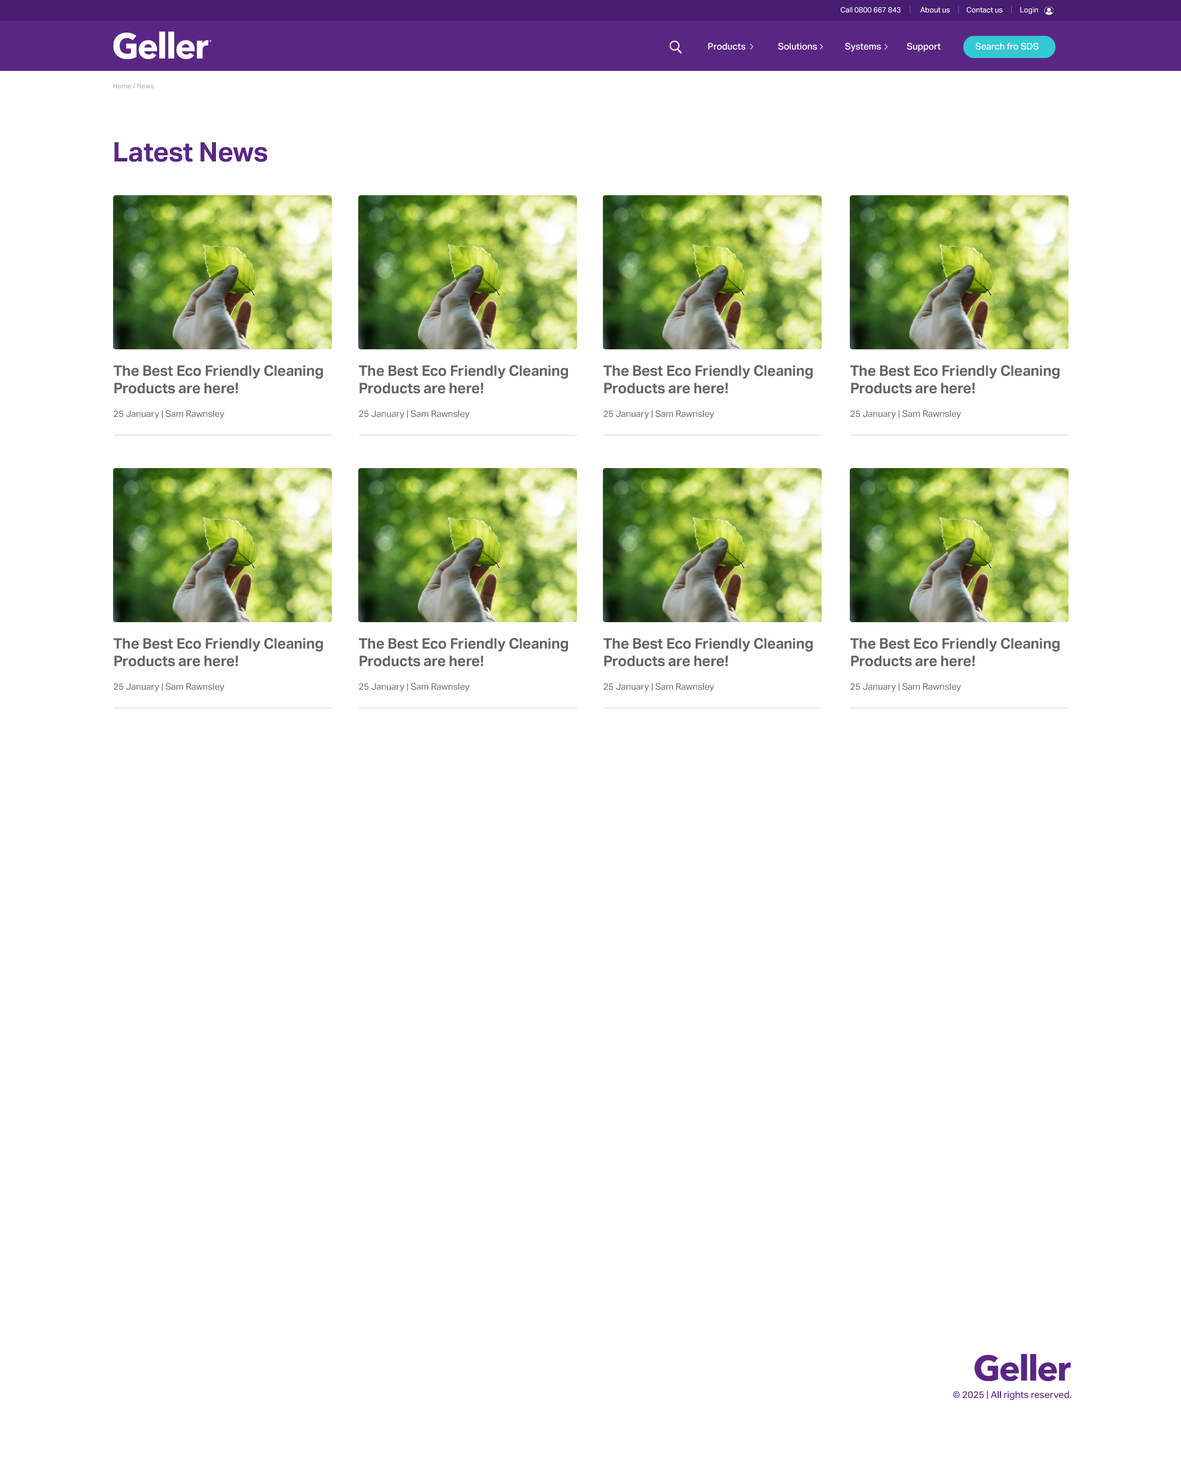
<style>
.page{position:relative;width:1181px;height:1484px;background:#ffffff}
.page>*{position:absolute;margin:0}
.t1{font:7.3px "AktivGrotesk-Regular";color:#fefefe}
.t2{font:9px "AktivGrotesk-Medium";color:#fefefe}
.t3{font:6.8px "AktivGrotesk-Medium";color:#b4b4b4}
.t4{font:27px "AktivGrotesk-Bold";letter-spacing:-0.01em;color:#5a2684}
.t5{font:14.6px "AktivGrotesk-Bold";letter-spacing:-0.01em;color:#646464}
.t6{font:9px "AktivGrotesk-Regular";color:#646464}
.t7{font:9.4px "AktivGrotesk-Medium";color:#5a2684}
</style>
<div class="page">
<p class="t1" style="left:841px;top:7px;width:60px;height:6px">Call 0800 667 843</p>
<p class="t1" style="left:920px;top:7px;width:30px;height:6px">About us</p>
<p class="t1" style="left:967px;top:7px;width:36px;height:6px">Contact us</p>
<p class="t1" style="left:1020px;top:7px;width:18px;height:7px">Login</p>
<p class="t2" style="left:708px;top:43px;width:38px;height:7px">Products</p>
<p class="t2" style="left:778px;top:43px;width:39px;height:7px">Solutions</p>
<p class="t2" style="left:845px;top:43px;width:36px;height:9px">Systems</p>
<p class="t2" style="left:907px;top:43px;width:34px;height:9px">Support</p>
<p class="t2" style="left:975px;top:43px;width:64px;height:7px">Search fro SDS</p>
<p class="t3" style="left:113px;top:83px;width:41px;height:6px">Home / News</p>
<p class="t4" style="left:114px;top:142px;width:154px;height:20px">Latest News</p>
<p class="t5" style="left:114px;top:365px;width:209px;height:29px">The Best Eco Friendly Cleaning Products are here!</p>
<p class="t5" style="left:359px;top:365px;width:209px;height:29px">The Best Eco Friendly Cleaning Products are here!</p>
<p class="t5" style="left:604px;top:365px;width:209px;height:29px">The Best Eco Friendly Cleaning Products are here!</p>
<p class="t5" style="left:850px;top:365px;width:210px;height:29px">The Best Eco Friendly Cleaning Products are here!</p>
<p class="t6" style="left:114px;top:410px;width:110px;height:8px">25 January | Sam Rawnsley</p>
<p class="t6" style="left:359px;top:410px;width:111px;height:8px">25 January | Sam Rawnsley</p>
<p class="t6" style="left:604px;top:410px;width:110px;height:8px">25 January | Sam Rawnsley</p>
<p class="t6" style="left:850px;top:410px;width:111px;height:8px">25 January | Sam Rawnsley</p>
<p class="t5" style="left:114px;top:638px;width:209px;height:29px">The Best Eco Friendly Cleaning Products are here!</p>
<p class="t5" style="left:359px;top:638px;width:209px;height:29px">The Best Eco Friendly Cleaning Products are here!</p>
<p class="t5" style="left:604px;top:638px;width:209px;height:29px">The Best Eco Friendly Cleaning Products are here!</p>
<p class="t5" style="left:850px;top:638px;width:210px;height:29px">The Best Eco Friendly Cleaning Products are here!</p>
<p class="t6" style="left:114px;top:683px;width:110px;height:8px">25 January | Sam Rawnsley</p>
<p class="t6" style="left:359px;top:683px;width:111px;height:8px">25 January | Sam Rawnsley</p>
<p class="t6" style="left:604px;top:683px;width:110px;height:8px">25 January | Sam Rawnsley</p>
<p class="t6" style="left:850px;top:683px;width:111px;height:8px">25 January | Sam Rawnsley</p>
<p class="t7" style="left:953px;top:1390px;width:119px;height:10px">© 2025 | All rights reserved.</p>
</div>
